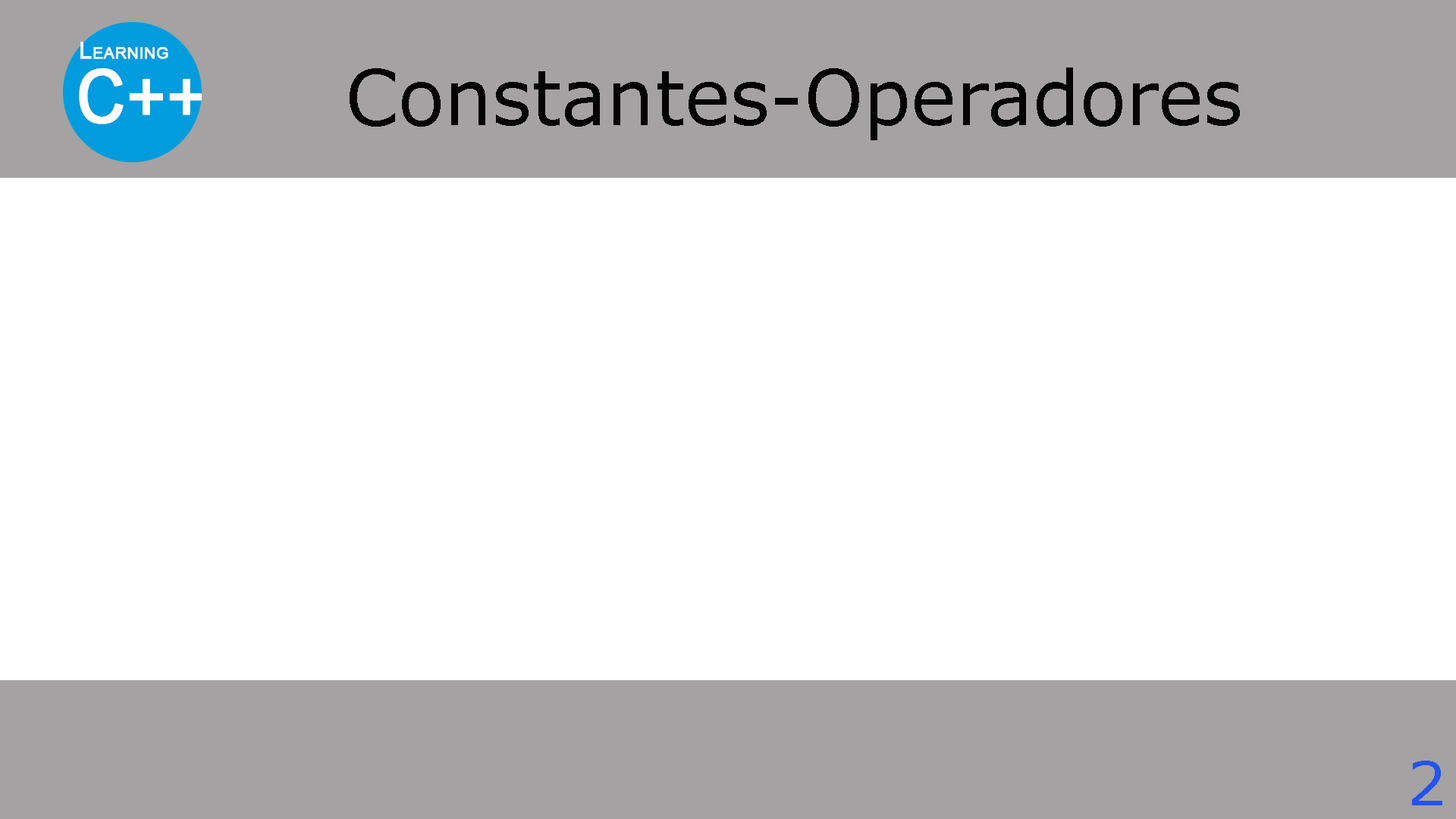
<style>
.page{position:relative;width:1456px;height:819px;background:#ffffff}
.page>*{position:absolute;margin:0}
.t1{font:75.8px "Verdana";color:#030303}
.t2{font:60.7px "Verdana";color:#2354f2}
</style>
<div class="page">
<p class="t1" style="left:350px;top:67px;width:890px;height:73px">Constantes-Operadores</p>
<p class="t2" style="left:1412px;top:761px;width:30px;height:44px">2</p>
</div>
